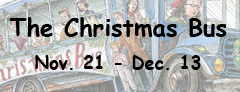
<style>
.page{position:relative;width:240px;height:92px}
.page>*{position:absolute;margin:0}
.t1{font:24px "ComicSansMS-Bold";color:#000000}
.t2{font:18px "ComicSansMS-Bold";color:#000000}
</style>
<div class="page">
<p class="t1" style="left:7px;top:15px;width:223px;height:34px">The Christmas Bus</p>
<p class="t2" style="left:9px;top:54px;width:218px;height:28px">Nov. 21 - Dec. 13</p>
</div>
